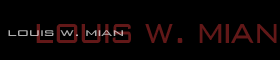
<style>
.page{position:relative;width:280px;height:60px;background:#000000}
.page>*{position:absolute;margin:0}
.t1{font:10.5px "WallStreetRegularSWFTE";letter-spacing:0.052em;color:#adadad;scale:1.41 1}
.t2{font:35.4px "WallStreetRegularSWFTE";letter-spacing:0.05em;color:#621818;scale:0.88 1}
</style>
<div class="page">
<p class="t1" style="left:8px;top:30px;width:115px;height:6px">louis w. mian</p>
<p class="t2" style="left:36px;top:24px;width:241px;height:19px">louis w. mian</p>
</div>
